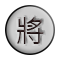
<style>
.page{position:relative;width:60px;height:60px;background:#ffffff}
.page>*{position:absolute;margin:0}
.t1{font:29.6px "MicrosoftJhengHeiRegular";color:#261616}
</style>
<div class="page">
<p class="t1" style="left:17px;top:17px;width:27px;height:27px">將</p>
</div>
